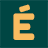
<style>
.page{position:relative;width:48px;height:48px;background:#004643}
.page>*{position:absolute;margin:0}
.t1{font:36.4px "FredokaOne-Regular";color:#f9bc60}
</style>
<div class="page">
<p class="t1" style="left:13px;top:4px;width:22px;height:36px">É</p>
</div>
